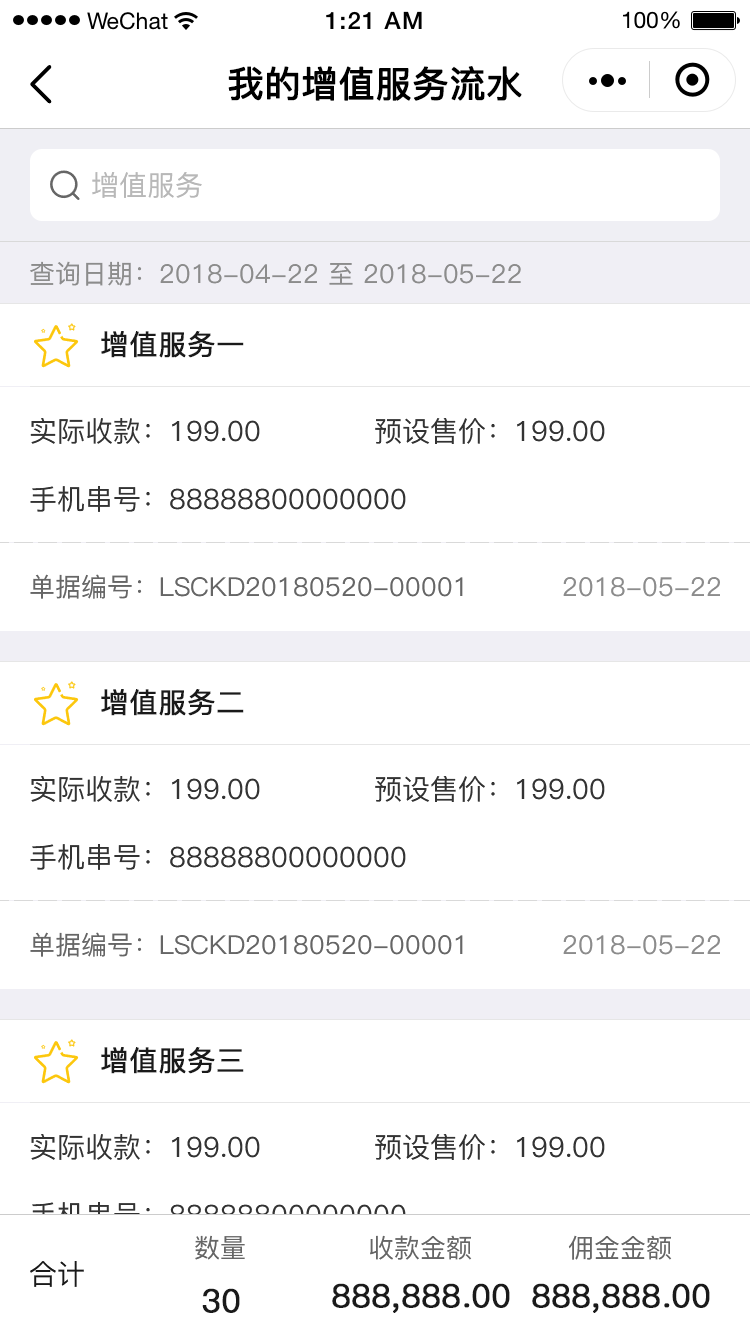
<style>
.page{position:relative;width:750px;height:1334px;background:#ffffff}
.page>*{position:absolute;margin:0}
.t1{font:36px "PingFang-SC-Medium";color:#000000;font-weight:bold}
.t2{font:28px "PingFang-SC-Medium";color:#b8b8b8}
.t3{font:26px "PingFang-SC-Medium";color:#8c8c8c}
.t4{font:28px "PingFang-SC-Medium";color:#1a1a1a;font-weight:bold}
.t5{font:28px "PingFang-SC-Medium";color:#333333}
.t6{font:26px "PingFang-SC-Medium";color:#666666}
.t7{font:28px "PingFang-SC-Medium"}
.t8{font:28px "PingFang-SC-Medium";color:#1a1a1a}
.t9{font:32px "PingFang-SC-Medium";color:#1a1a1a;font-weight:bold}
</style>
<div class="page">
<p class="t1" style="left:228px;top:66px;width:294px;height:35px">我的增值服务流水</p>
<p class="t2" style="left:92px;top:172px;width:110px;height:26px">增值服务</p>
<p class="t3" style="left:30px;top:261px;width:491px;height:25px">查询日期：2018-04-22 至 2018-05-22</p>
<p class="t4" style="left:101px;top:331px;width:143px;height:27px">增值服务一</p>
<p class="t5" style="left:30px;top:418px;width:230px;height:26px">实际收款：199.00</p>
<p class="t5" style="left:375px;top:418px;width:230px;height:26px">预设售价：199.00</p>
<p class="t5" style="left:30px;top:486px;width:376px;height:26px">手机串号：88888800000000</p>
<p class="t6" style="left:30px;top:574px;width:433px;height:25px">单据编号：LSCKD20180520-00001</p>
<p class="t3" style="left:563px;top:577px;width:157px;height:20px">2018-05-22</p>
<p class="t4" style="left:101px;top:689px;width:143px;height:27px">增值服务二</p>
<p class="t5" style="left:30px;top:776px;width:230px;height:26px">实际收款：199.00</p>
<p class="t5" style="left:375px;top:776px;width:230px;height:26px">预设售价：199.00</p>
<p class="t5" style="left:30px;top:844px;width:376px;height:26px">手机串号：88888800000000</p>
<p class="t6" style="left:30px;top:932px;width:433px;height:25px">单据编号：LSCKD20180520-00001</p>
<p class="t3" style="left:563px;top:935px;width:157px;height:20px">2018-05-22</p>
<p class="t4" style="left:101px;top:1047px;width:143px;height:27px">增值服务三</p>
<p class="t5" style="left:30px;top:1134px;width:230px;height:26px">实际收款：199.00</p>
<p class="t5" style="left:375px;top:1134px;width:230px;height:26px">预设售价：199.00</p>
<p class="t7" style="left:30px;top:1202px;width:376px;height:26px">手机串号：88888800000000</p>
<p class="t6" style="left:195px;top:1235px;width:50px;height:25px">数量</p>
<p class="t6" style="left:370px;top:1235px;width:102px;height:25px">收款金额</p>
<p class="t6" style="left:568px;top:1235px;width:104px;height:25px">佣金金额</p>
<p class="t8" style="left:30px;top:1261px;width:54px;height:26px">合计</p>
<p class="t9" style="left:202px;top:1288px;width:38px;height:25px">30</p>
<p class="t9" style="left:332px;top:1283px;width:178px;height:30px">888,888.00</p>
<p class="t9" style="left:532px;top:1283px;width:178px;height:30px">888,888.00</p>
</div>
